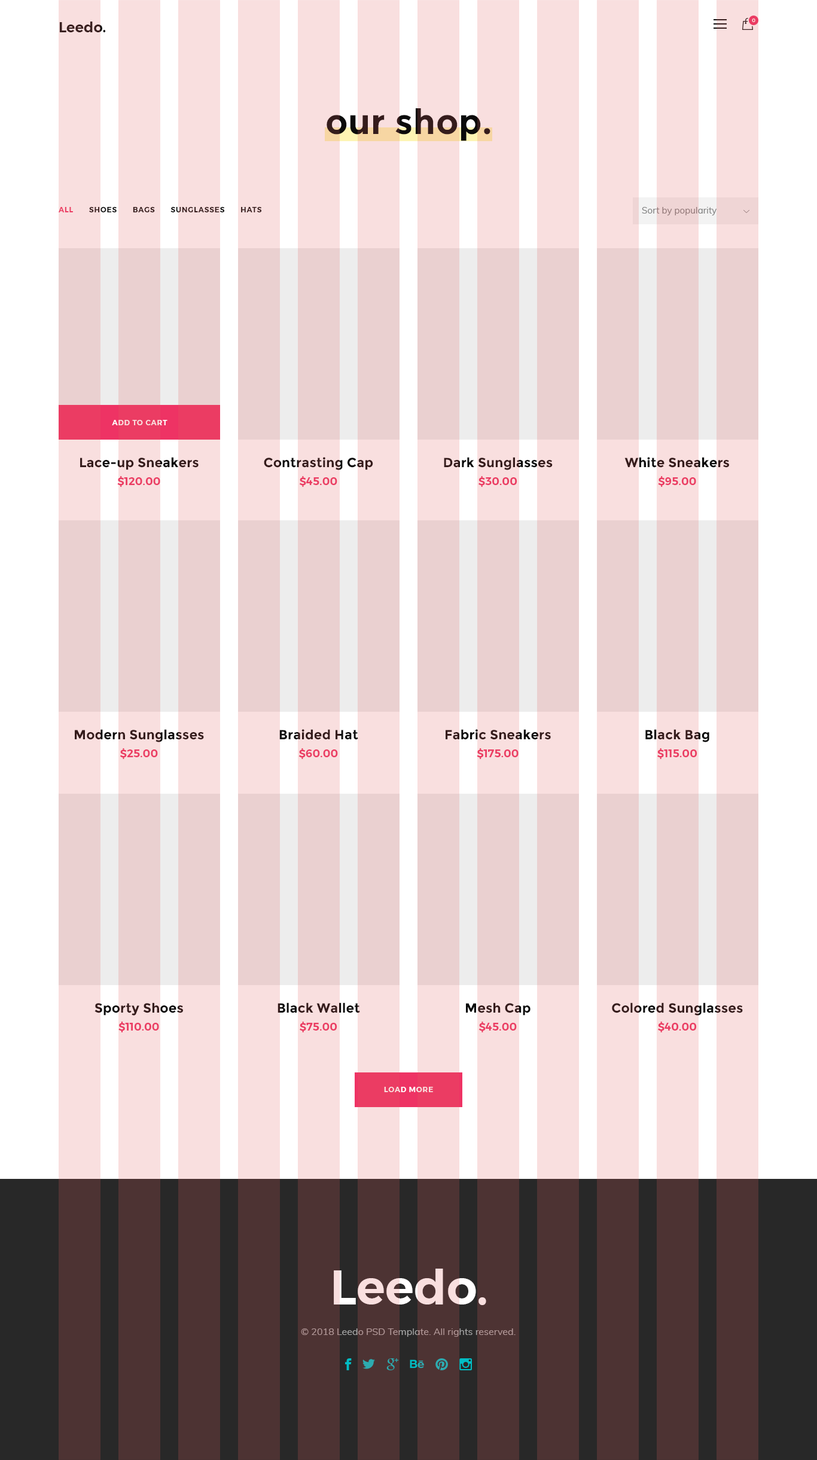
<style>
.page{position:relative;width:817px;height:1460px;background:#ffffff}
.page>*{position:absolute;margin:0}
.t1{font:14.4px "Montserrat-SemiBold";color:#3a2020}
.t2{font:4.8px "Montserrat-Medium";letter-spacing:0.05em;color:#f9dfdf;text-transform:uppercase}
.t3{font:34.7px "Montserrat-Bold";letter-spacing:0.01em}
.t4{font:7.2px "Montserrat-SemiBold";letter-spacing:0.075em;text-transform:uppercase}
.t5{font:9px "Muli-Regular";letter-spacing:0.005em;color:#818181}
.t6{font:7.2px "Montserrat-SemiBold";letter-spacing:0.075em;color:#f9dfdf;text-transform:uppercase}
.t7{font:13.2px/17.9px "Montserrat-Bold";letter-spacing:0.005em}
.t8{font:10.8px/17.9px "Montserrat-SemiBold";letter-spacing:0.005em}
.t9{font:47.8px "Montserrat-SemiBold";color:#f9dfdf}
.t10{font:9.6px "Muli-Regular";color:#a7a7a7}
</style>
<div class="page">
<p class="t1" style="left:59px;top:22px;width:47px;height:10px">Leedo.</p>
<p class="t2" style="left:752px;top:19px;width:3px;height:3px">0</p>
<p class="t3" style="left:327px;top:108px;width:163px;height:33px">our shop.</p>
<p class="t4" style="left:59px;top:207px;width:203px;height:5px">all       shoes       bags       sunglasses       hats</p>
<p class="t5" style="left:642px;top:207px;width:75px;height:9px">Sort by popularity</p>
<p class="t6" style="left:112px;top:420px;width:55px;height:5px">add to cart</p>
<p class="t7" style="left:80px;top:457px;width:119px;height:30px;text-align:center">Lace-up Sneakers<br><span class="t8">$120.00</span></p>
<p class="t7" style="left:264px;top:457px;width:109px;height:30px;text-align:center">Contrasting Cap<br><span class="t8">$45.00</span></p>
<p class="t7" style="left:444px;top:457px;width:109px;height:30px;text-align:center">Dark Sunglasses<br><span class="t8">$30.00</span></p>
<p class="t7" style="left:624px;top:457px;width:105px;height:30px;text-align:center">White Sneakers<br><span class="t8">$95.00</span></p>
<p class="t7" style="left:75px;top:729px;width:129px;height:30px;text-align:center">Modern Sunglasses<br><span class="t8">$25.00</span></p>
<p class="t7" style="left:279px;top:729px;width:79px;height:30px;text-align:center">Braided Hat<br><span class="t8">$60.00</span></p>
<p class="t7" style="left:446px;top:729px;width:105px;height:30px;text-align:center">Fabric Sneakers<br><span class="t8">$175.00</span></p>
<p class="t7" style="left:645px;top:729px;width:64px;height:30px;text-align:center">Black Bag<br><span class="t8">$115.00</span></p>
<p class="t7" style="left:94px;top:1002px;width:89px;height:30px;text-align:center">Sporty Shoes<br><span class="t8">$110.00</span></p>
<p class="t7" style="left:277px;top:1002px;width:83px;height:30px;text-align:center">Black Wallet<br><span class="t8">$75.00</span></p>
<p class="t7" style="left:466px;top:1002px;width:64px;height:30px;text-align:center">Mesh Cap<br><span class="t8">$45.00</span></p>
<p class="t7" style="left:612px;top:1002px;width:131px;height:30px;text-align:center">Colored Sunglasses<br><span class="t8">$40.00</span></p>
<p class="t4" style="left:384px;top:1087px;width:49px;height:5px">load more</p>
<p class="t9" style="left:334px;top:1268px;width:152px;height:37px">Leedo.</p>
<p class="t10" style="left:301px;top:1328px;width:214px;height:9px">© 2018 Leedo PSD Template. All rights reserved.</p>
</div>
